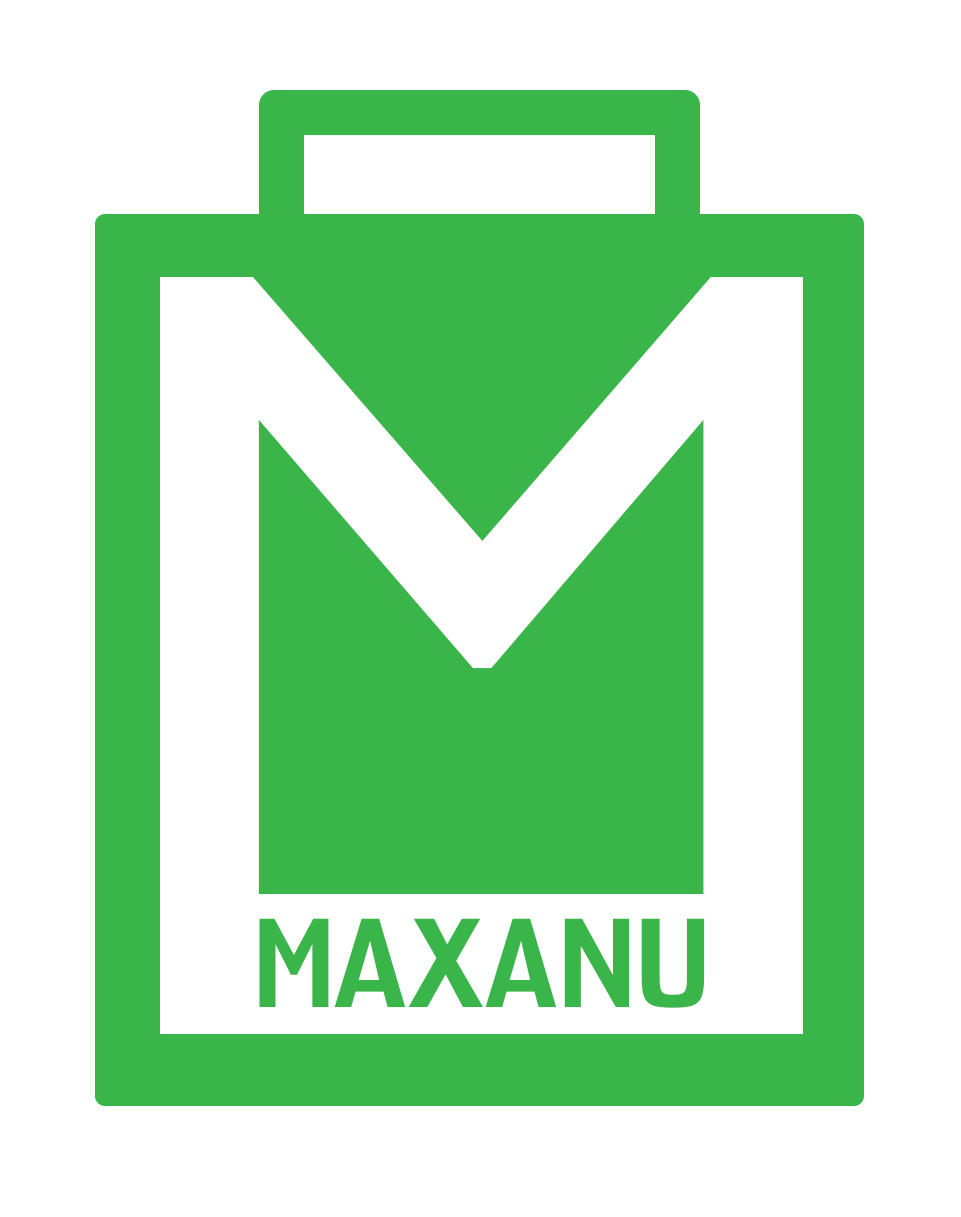
<style>
.page{position:relative;width:961px;height:1217px;background:#ffffff}
.page>*{position:absolute;margin:0}
.t1{font:940.6px "GillSansMT";color:#ffffff;scale:1.08 1}
.t2{font:111.9px "NK57MonospaceCdSb-Regular";color:#39b54a;scale:1.39 1}
</style>
<div class="page">
<p class="t1" style="left:160px;top:277px;width:643px;height:642px">M</p>
<p class="t2" style="left:259px;top:918px;width:446px;height:90px">MAXANU</p>
</div>
